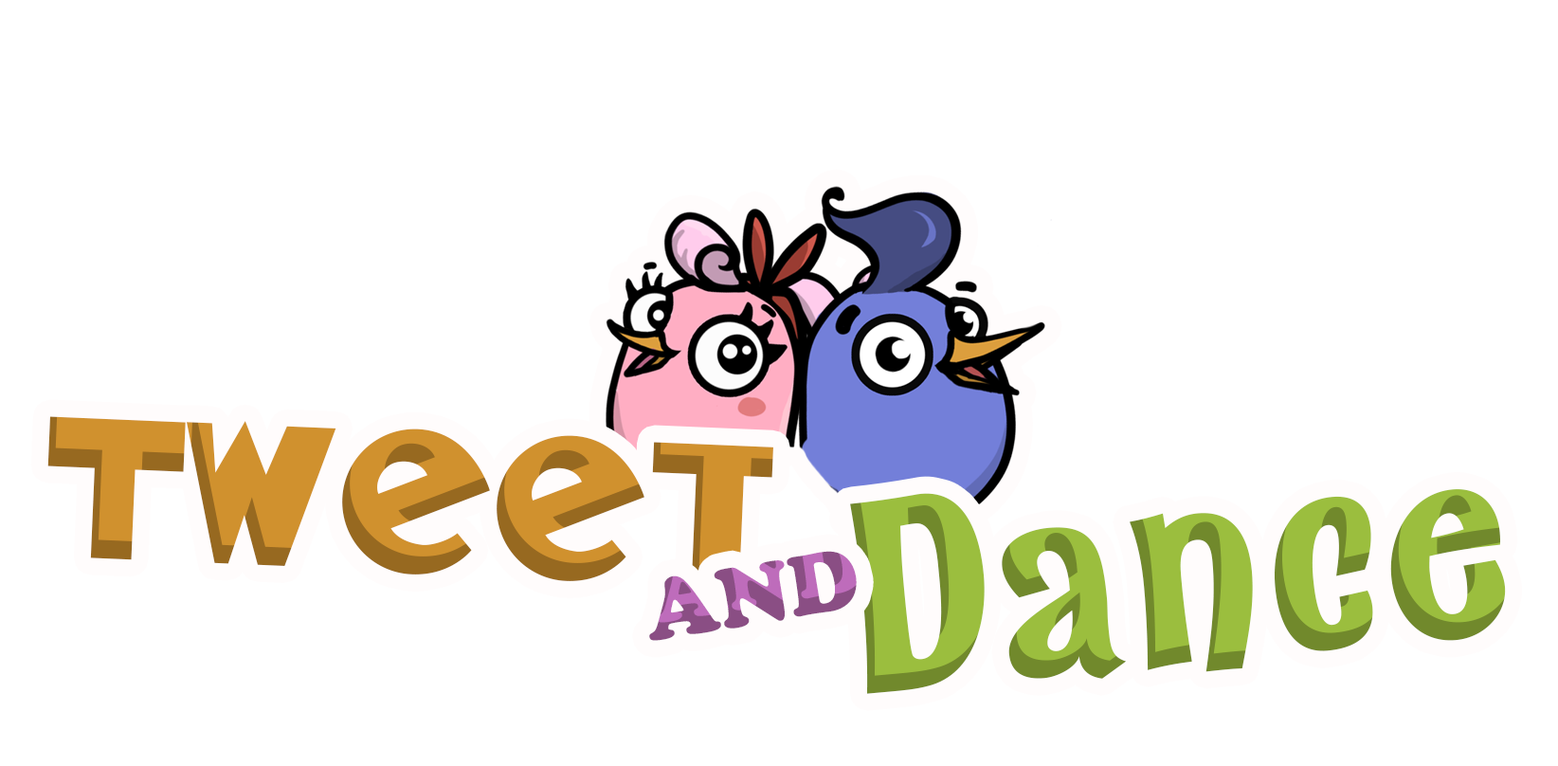
<style>
.page{position:relative;width:1558px;height:766px;background:#ffffff}
.page>*{position:absolute;margin:0}
.t1{font:193.3px "BadTyp-Regular";color:#d0912e}
.t2{font:267.7px "Catseye-Bold";color:#9bbe3e}
.t3{font:87.8px "CooperBlack"}
</style>
<div class="page">
<p class="t1" style="left:47px;top:416px;width:726px;height:170px;rotate:2deg">Tweet</p>
<p class="t2" style="left:850px;top:489px;width:656px;height:205px;rotate:-5deg">Dance</p>
<p class="t3" style="left:649px;top:550px;width:208px;height:90px;rotate:-9deg">AND</p>
</div>
